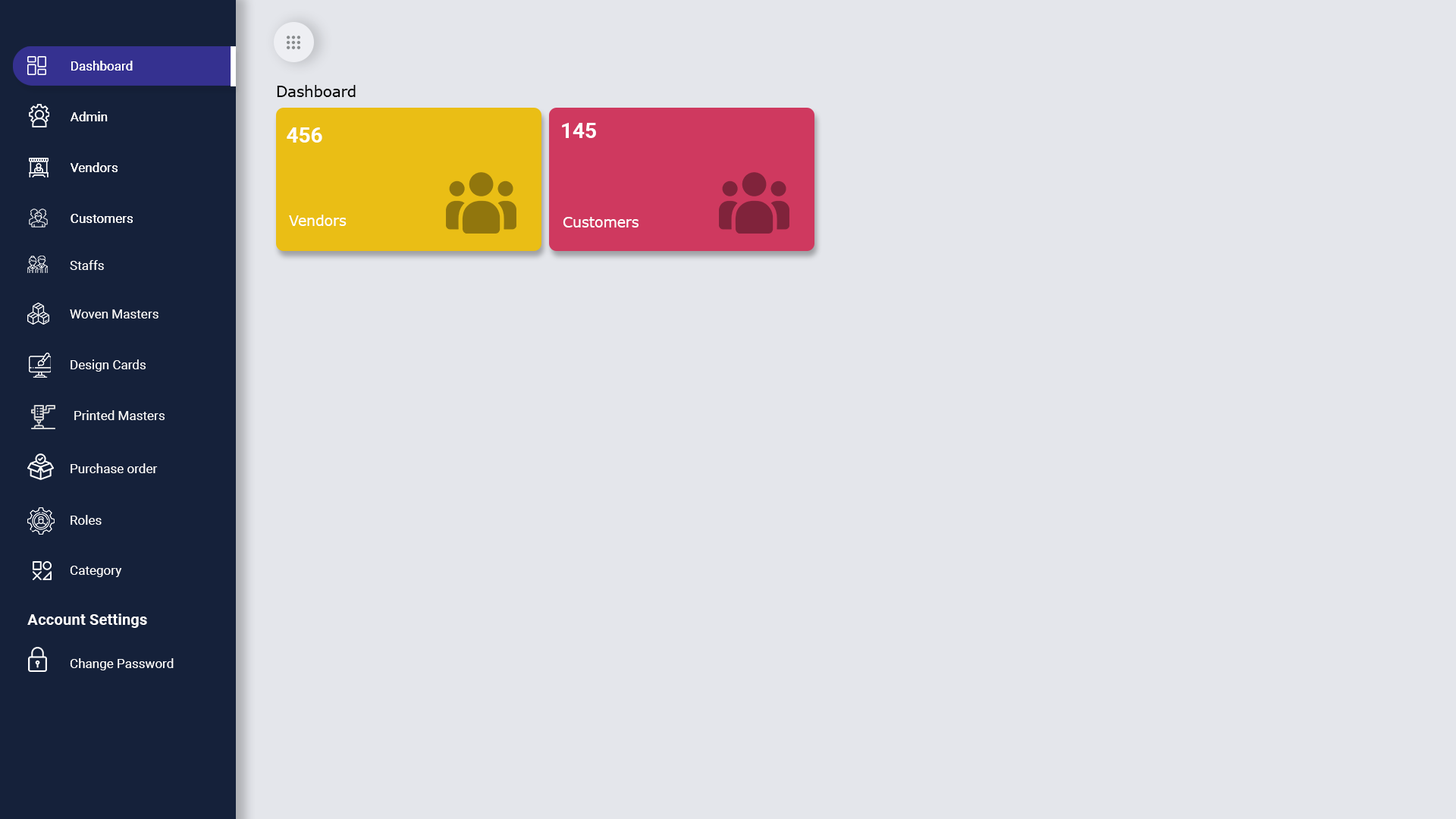
<style>
.page{position:relative;width:1456px;height:819px;background:#e4e6eb}
.page>*{position:absolute;margin:0}
.t1{font:12.9px "Roboto-Regular";color:#ffffff}
.t2{font:14.9px "MSReferenceSansSerif";color:#000000}
.t3{font:21.3px "Roboto-Bold";color:#ffffff}
.t4{font:14.2px "MSReferenceSansSerif";color:#ffffff}
.t5{font:15.5px "Roboto-Bold";color:#ffffff}
</style>
<div class="page">
<p class="t1" style="left:71px;top:61px;width:62px;height:10px">Dashboard</p>
<p class="t1" style="left:71px;top:61px;width:62px;height:10px">Dashboard</p>
<p class="t2" style="left:277px;top:85px;width:79px;height:12px">Dashboard</p>
<p class="t1" style="left:71px;top:111px;width:37px;height:10px">Admin</p>
<p class="t1" style="left:71px;top:111px;width:37px;height:10px">Admin</p>
<p class="t3" style="left:562px;top:123px;width:34px;height:15px">145</p>
<p class="t3" style="left:287px;top:127px;width:35px;height:16px">456</p>
<p class="t1" style="left:71px;top:162px;width:47px;height:10px">Vendors</p>
<p class="t1" style="left:71px;top:162px;width:47px;height:10px">Vendors</p>
<p class="t1" style="left:71px;top:214px;width:62px;height:9px">Customers</p>
<p class="t1" style="left:71px;top:214px;width:62px;height:9px">Customers</p>
<p class="t4" style="left:289px;top:215px;width:58px;height:11px">Vendors</p>
<p class="t4" style="left:563px;top:217px;width:76px;height:10px">Customers</p>
<p class="t1" style="left:70px;top:260px;width:34px;height:10px">Staffs</p>
<p class="t1" style="left:70px;top:309px;width:88px;height:9px">Woven Masters</p>
<p class="t1" style="left:71px;top:359px;width:75px;height:13px">Design Cards</p>
<p class="t1" style="left:74px;top:410px;width:91px;height:10px">Printed Masters</p>
<p class="t1" style="left:71px;top:463px;width:87px;height:10px">Purchase order</p>
<p class="t1" style="left:71px;top:515px;width:31px;height:10px">Roles</p>
<p class="t1" style="left:70px;top:566px;width:52px;height:11px">Category</p>
<p class="t5" style="left:27px;top:613px;width:120px;height:15px">Account Settings</p>
<p class="t1" style="left:70px;top:658px;width:104px;height:12px">Change Password</p>
</div>
